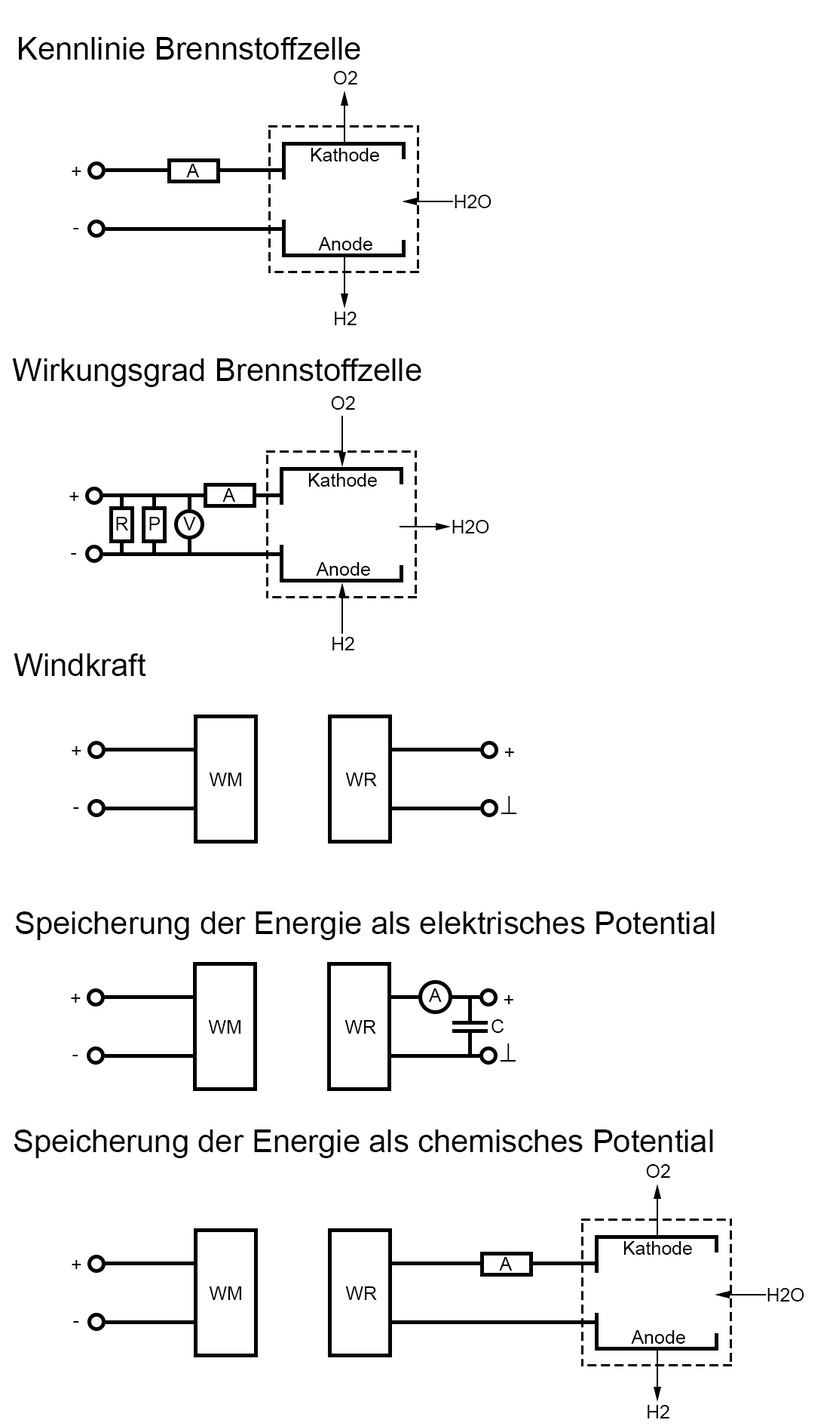
<style>
.page{position:relative;width:836px;height:1426px;background:#ffffff}
.page>*{position:absolute;margin:0}
.t1{font:31.4px "ArialMT";color:#000000}
.t2{font:18.9px "ArialMT";color:#000000}
.t3{font:18.8px "ArialMT";color:#000000}
</style>
<div class="page">
<p class="t1" style="left:19px;top:37px;width:342px;height:23px">Kennlinie Brennstoffzelle</p>
<p class="t2" style="left:333px;top:71px;width:25px;height:13px">O2</p>
<p class="t2" style="left:311px;top:148px;width:68px;height:13px">Kathode</p>
<p class="t2" style="left:72px;top:167px;width:9px;height:9px">+</p>
<p class="t2" style="left:186px;top:164px;width:14px;height:13px">A</p>
<p class="t2" style="left:455px;top:195px;width:37px;height:13px">H2O</p>
<p class="t2" style="left:73px;top:228px;width:5px;height:1px">-</p>
<p class="t2" style="left:318px;top:237px;width:55px;height:13px">Anode</p>
<p class="t2" style="left:335px;top:312px;width:22px;height:13px">H2</p>
<p class="t1" style="left:12px;top:358px;width:410px;height:29px">Wirkungsgrad Brennstoffzelle</p>
<p class="t2" style="left:331px;top:396px;width:24px;height:14px">O2</p>
<p class="t2" style="left:308px;top:473px;width:69px;height:13px">Kathode</p>
<p class="t2" style="left:69px;top:492px;width:10px;height:9px">+</p>
<p class="t2" style="left:223px;top:488px;width:13px;height:14px">A</p>
<p class="t2" style="left:116px;top:517px;width:12px;height:13px">R</p>
<p class="t2" style="left:149px;top:517px;width:11px;height:13px">P</p>
<p class="t2" style="left:183px;top:517px;width:13px;height:13px">V</p>
<p class="t2" style="left:453px;top:520px;width:37px;height:13px">H2O</p>
<p class="t2" style="left:71px;top:553px;width:5px;height:1px">-</p>
<p class="t2" style="left:316px;top:562px;width:54px;height:13px">Anode</p>
<p class="t2" style="left:333px;top:637px;width:22px;height:13px">H2</p>
<p class="t1" style="left:14px;top:653px;width:132px;height:23px">Windkraft</p>
<p class="t2" style="left:72px;top:746px;width:9px;height:9px">+</p>
<p class="t3" style="left:505px;top:747px;width:9px;height:10px;rotate:-180deg">+</p>
<p class="t2" style="left:209px;top:772px;width:32px;height:14px">WM</p>
<p class="t2" style="left:345px;top:772px;width:32px;height:14px">WR</p>
<p class="t3" style="left:508px;top:796px;width:3px;height:17px;rotate:-180deg">|</p>
<p class="t2" style="left:73px;top:807px;width:5px;height:2px">-</p>
<p class="t1" style="left:15px;top:911px;width:700px;height:29px">Speicherung der Energie als elektrisches Potential</p>
<p class="t2" style="left:429px;top:988px;width:13px;height:14px">A</p>
<p class="t2" style="left:71px;top:993px;width:10px;height:9px">+</p>
<p class="t3" style="left:505px;top:995px;width:9px;height:9px;rotate:-180deg">+</p>
<p class="t2" style="left:208px;top:1020px;width:33px;height:13px">WM</p>
<p class="t2" style="left:345px;top:1020px;width:31px;height:13px">WR</p>
<p class="t2" style="left:492px;top:1019px;width:13px;height:14px">C</p>
<p class="t3" style="left:508px;top:1043px;width:2px;height:17px;rotate:-180deg">|</p>
<p class="t2" style="left:72px;top:1054px;width:6px;height:2px">-</p>
<p class="t1" style="left:14px;top:1129px;width:700px;height:29px">Speicherung der Energie als chemisches Potential</p>
<p class="t2" style="left:646px;top:1164px;width:25px;height:13px">O2</p>
<p class="t2" style="left:624px;top:1241px;width:68px;height:13px">Kathode</p>
<p class="t2" style="left:72px;top:1260px;width:9px;height:9px">+</p>
<p class="t2" style="left:499px;top:1257px;width:14px;height:13px">A</p>
<p class="t2" style="left:209px;top:1286px;width:32px;height:14px">WM</p>
<p class="t2" style="left:345px;top:1286px;width:32px;height:14px">WR</p>
<p class="t2" style="left:768px;top:1288px;width:37px;height:13px">H2O</p>
<p class="t2" style="left:73px;top:1321px;width:5px;height:1px">-</p>
<p class="t2" style="left:631px;top:1330px;width:55px;height:13px">Anode</p>
<p class="t2" style="left:648px;top:1404px;width:22px;height:14px">H2</p>
</div>
